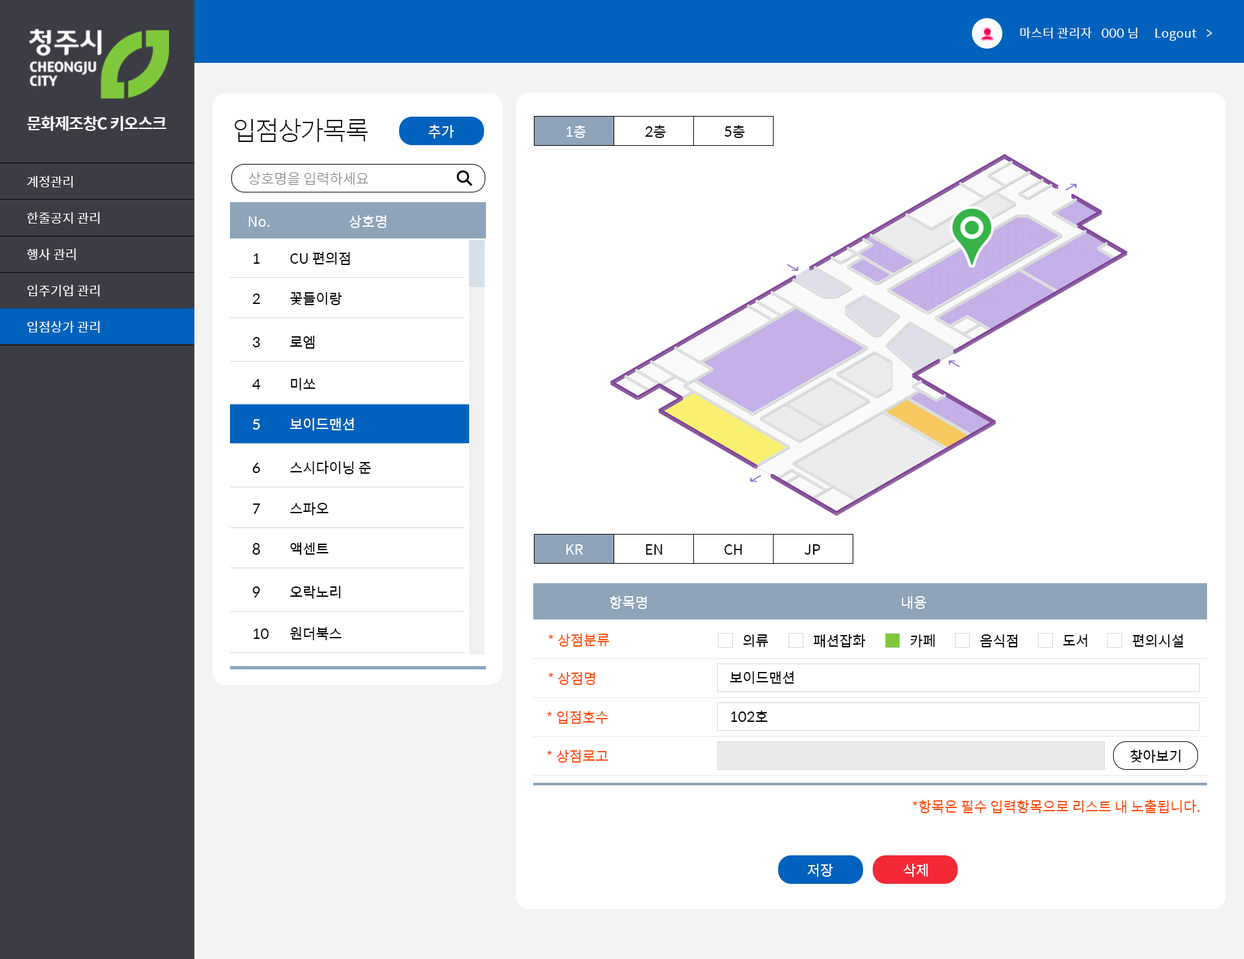
<style>
.page{position:relative;width:1244px;height:959px;background:#ffffff}
.page>*{position:absolute;margin:0}
.t1{font:12.3px "SpoqaHanSans-Regular";letter-spacing:0.025em;color:#ffffff}
.t2{font:16.2px "SpoqaHanSans-Bold";letter-spacing:-0.05em;color:#ffffff}
.t3{font:25.9px "SpoqaHanSans-Light";letter-spacing:-0.05em;color:#000000}
.t4{font:14.3px "SpoqaHanSans-Regular";color:#ffffff}
.t5{font:14.3px "SpoqaHanSans-Regular";color:#000000}
.t6{font:14.3px "SpoqaHanSans-Light";color:#787878}
.t7{font:13px/36.3px "SpoqaHanSans-Regular";color:#ffffff}
.t8{font:14.3px "SpoqaHanSans-Regular";color:#ff5012}
</style>
<div class="page">
<p class="t1" style="left:1020px;top:27px;width:192px;height:14px">마스터 관리자   000 님     Logout   &gt;</p>
<p class="t2" style="left:27px;top:116px;width:139px;height:15px">문화제조창C 키오스크</p>
<p class="t3" style="left:235px;top:118px;width:133px;height:24px">입점상가목록</p>
<p class="t3" style="left:235px;top:118px;width:133px;height:24px">입점상가목록</p>
<p class="t4" style="left:428px;top:124px;width:26px;height:15px">추가</p>
<p class="t4" style="left:428px;top:124px;width:26px;height:15px">추가</p>
<p class="t4" style="left:566px;top:125px;width:20px;height:13px">1층</p>
<p class="t5" style="left:645px;top:125px;width:21px;height:13px">2층</p>
<p class="t5" style="left:724px;top:125px;width:21px;height:13px">5층</p>
<p class="t6" style="left:248px;top:172px;width:121px;height:13px">상호명을 입력하세요</p>
<p class="t6" style="left:248px;top:172px;width:121px;height:13px">상호명을 입력하세요</p>
<p class="t7" style="left:27px;top:176px;width:73px;height:157px">계정관리<br>한줄공지 관리<br>행사 관리<br>입주기업 관리<br>입점상가 관리</p>
<p class="t4" style="left:249px;top:216px;width:20px;height:11px">No.</p>
<p class="t4" style="left:249px;top:216px;width:20px;height:11px">No.</p>
<p class="t4" style="left:349px;top:215px;width:37px;height:13px">상호명</p>
<p class="t4" style="left:349px;top:215px;width:37px;height:13px">상호명</p>
<p class="t5" style="left:253px;top:253px;width:7px;height:11px">1</p>
<p class="t5" style="left:253px;top:253px;width:7px;height:11px">1</p>
<p class="t5" style="left:290px;top:251px;width:60px;height:14px">CU 편의점</p>
<p class="t5" style="left:290px;top:251px;width:60px;height:14px">CU 편의점</p>
<p class="t5" style="left:253px;top:293px;width:7px;height:11px">2</p>
<p class="t5" style="left:253px;top:293px;width:7px;height:11px">2</p>
<p class="t5" style="left:290px;top:292px;width:52px;height:13px">꽃들이랑</p>
<p class="t5" style="left:290px;top:292px;width:52px;height:13px">꽃들이랑</p>
<p class="t5" style="left:253px;top:337px;width:7px;height:10px">3</p>
<p class="t5" style="left:253px;top:337px;width:7px;height:10px">3</p>
<p class="t5" style="left:290px;top:336px;width:25px;height:13px">로엠</p>
<p class="t5" style="left:290px;top:336px;width:25px;height:13px">로엠</p>
<p class="t5" style="left:291px;top:378px;width:24px;height:13px">미쏘</p>
<p class="t5" style="left:291px;top:378px;width:24px;height:13px">미쏘</p>
<p class="t5" style="left:252px;top:379px;width:8px;height:10px">4</p>
<p class="t5" style="left:252px;top:379px;width:8px;height:10px">4</p>
<p class="t4" style="left:253px;top:419px;width:7px;height:10px">5</p>
<p class="t4" style="left:253px;top:419px;width:7px;height:10px">5</p>
<p class="t4" style="left:290px;top:418px;width:64px;height:13px">보이드맨션</p>
<p class="t4" style="left:290px;top:418px;width:64px;height:13px">보이드맨션</p>
<p class="t5" style="left:290px;top:461px;width:81px;height:13px">스시다이닝 준</p>
<p class="t5" style="left:290px;top:461px;width:81px;height:13px">스시다이닝 준</p>
<p class="t5" style="left:253px;top:463px;width:7px;height:10px">6</p>
<p class="t5" style="left:253px;top:463px;width:7px;height:10px">6</p>
<p class="t5" style="left:253px;top:503px;width:7px;height:11px">7</p>
<p class="t5" style="left:253px;top:503px;width:7px;height:11px">7</p>
<p class="t5" style="left:290px;top:502px;width:38px;height:14px">스파오</p>
<p class="t5" style="left:290px;top:502px;width:38px;height:14px">스파오</p>
<p class="t5" style="left:252px;top:543px;width:8px;height:12px">8</p>
<p class="t5" style="left:252px;top:543px;width:8px;height:12px">8</p>
<p class="t5" style="left:290px;top:542px;width:38px;height:13px">액센트</p>
<p class="t5" style="left:290px;top:542px;width:38px;height:13px">액센트</p>
<p class="t4" style="left:566px;top:544px;width:17px;height:11px">KR</p>
<p class="t5" style="left:646px;top:544px;width:16px;height:11px">EN</p>
<p class="t5" style="left:724px;top:544px;width:18px;height:11px">CH</p>
<p class="t5" style="left:804px;top:544px;width:16px;height:11px">JP</p>
<p class="t5" style="left:253px;top:586px;width:7px;height:11px">9</p>
<p class="t5" style="left:253px;top:586px;width:7px;height:11px">9</p>
<p class="t5" style="left:290px;top:586px;width:51px;height:13px">오락노리</p>
<p class="t5" style="left:290px;top:586px;width:51px;height:13px">오락노리</p>
<p class="t4" style="left:610px;top:595px;width:36px;height:14px">항목명</p>
<p class="t4" style="left:902px;top:596px;width:24px;height:13px">내용</p>
<p class="t5" style="left:253px;top:628px;width:16px;height:11px">10</p>
<p class="t5" style="left:253px;top:628px;width:16px;height:11px">10</p>
<p class="t5" style="left:290px;top:626px;width:51px;height:14px">원더북스</p>
<p class="t5" style="left:290px;top:626px;width:51px;height:14px">원더북스</p>
<p class="t8" style="left:548px;top:634px;width:62px;height:12px">* 상점분류</p>
<p class="t5" style="left:743px;top:634px;width:25px;height:13px">의류</p>
<p class="t5" style="left:813px;top:634px;width:52px;height:14px">패션잡화</p>
<p class="t5" style="left:910px;top:634px;width:25px;height:13px">카페</p>
<p class="t5" style="left:980px;top:634px;width:37px;height:14px">음식점</p>
<p class="t5" style="left:1063px;top:634px;width:24px;height:13px">도서</p>
<p class="t5" style="left:1132px;top:634px;width:51px;height:13px">편의시설</p>
<p class="t8" style="left:548px;top:672px;width:47px;height:13px">* 상점명</p>
<p class="t5" style="left:730px;top:671px;width:64px;height:13px">보이드맨션</p>
<p class="t8" style="left:547px;top:711px;width:61px;height:13px">* 입점호수</p>
<p class="t5" style="left:731px;top:710px;width:37px;height:12px">102호</p>
<p class="t8" style="left:547px;top:749px;width:61px;height:13px">* 상점로고</p>
<p class="t5" style="left:1130px;top:749px;width:50px;height:14px">찾아보기</p>
<p class="t8" style="left:912px;top:799px;width:288px;height:14px">*항목은 필수 입력항목으로 리스트 내 노출됩니다.</p>
<p class="t4" style="left:807px;top:864px;width:26px;height:12px">저장</p>
<p class="t4" style="left:903px;top:864px;width:25px;height:13px">삭제</p>
</div>
